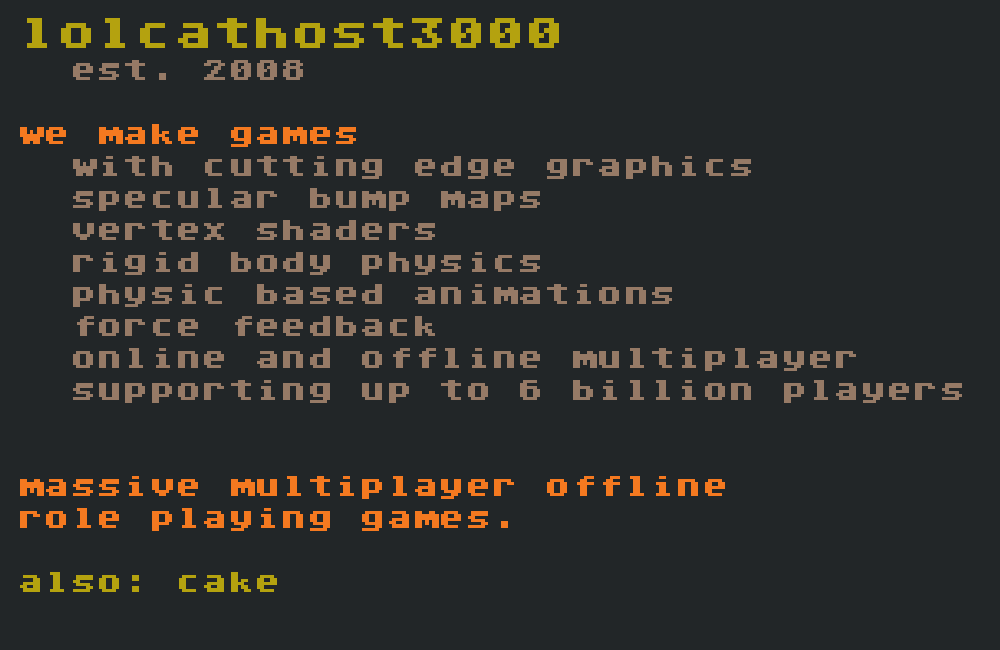
<style>
.page{position:relative;width:1000px;height:650px;background:#222628}
.page>*{position:absolute;margin:0}
.t1{font:26.7px "AtariClassicChunky";letter-spacing:-0.025em;color:#967a66}
.t2{font:40px "AtariClassicChunky";letter-spacing:-0.025em;color:#b4a20f}
.t3{font:26.7px "AtariClassicChunky";letter-spacing:-0.025em;color:#f47920}
.t4{font:26.7px "AtariClassicChunky";letter-spacing:-0.025em;color:#b4a20f}
</style>
<div class="page">
<p class="t1" style="left:20px;top:18px;width:942px;height:574px"><span class="t2">lolcathost3000<br></span>  est. 2008<br><br><span class="t3">we make games<br>  </span>with cutting edge graphics<br>  specular bump maps<br>  vertex shaders<br>  rigid body physics<br>  physic based animations<br>  force feedback<br>  online and offline multiplayer<br>  supporting up to 6 billion players<br><br><br><span class="t3">massive multiplayer offline<br>role playing games.<br><br></span><span class="t4">also: cake</span></p>
</div>
